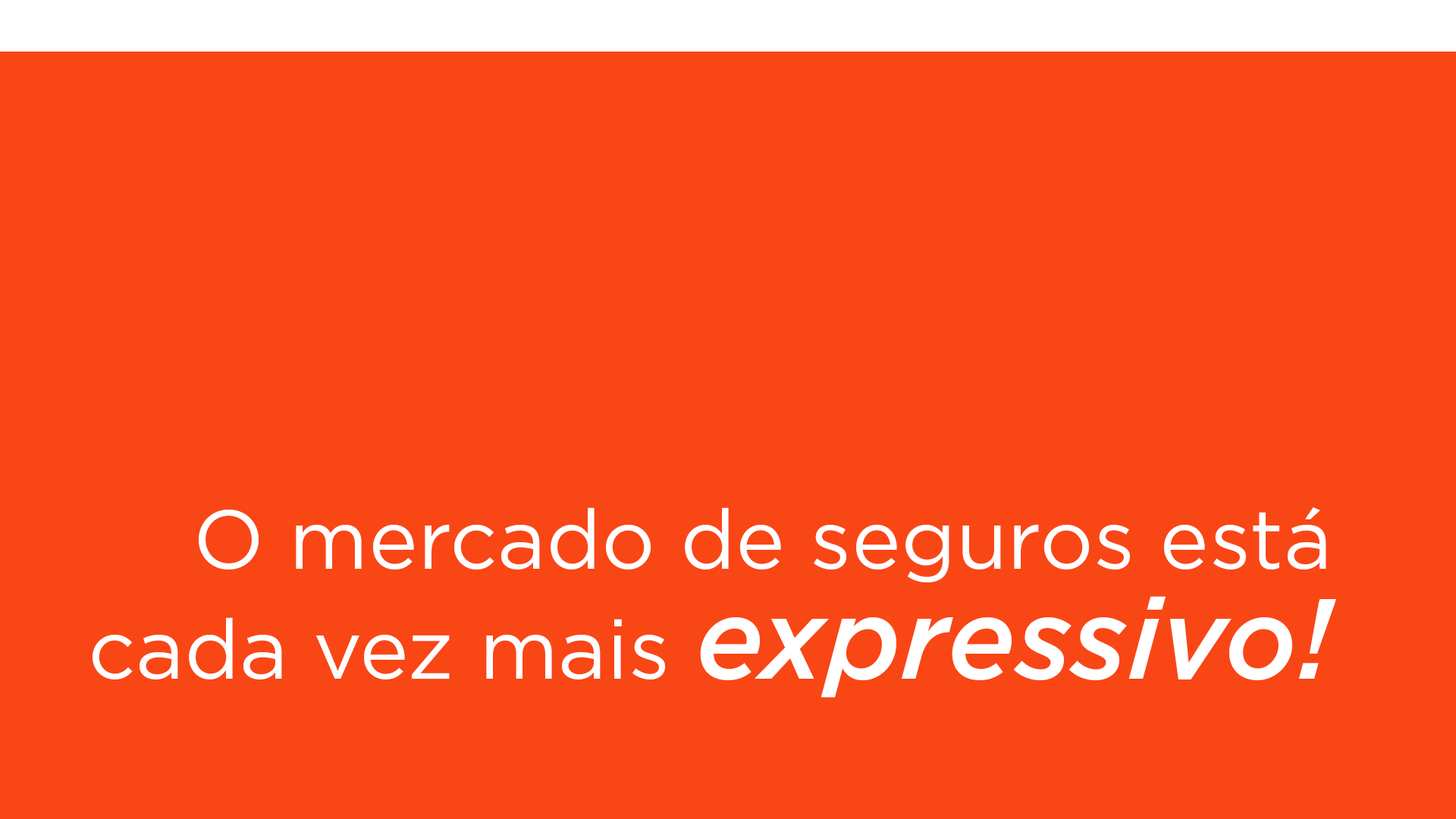
<style>
.page{position:relative;width:1456px;height:819px;background:#f94615}
.page>*{position:absolute;margin:0}
.t1{font:83.4px "Gotham-Book";color:#ffffff}
.t2{font:113.7px "Gotham-MediumItalic";color:#ffffff}
</style>
<div class="page">
<p class="t1" style="left:93px;top:507px;width:1243px;height:191px">O mercado de seguros está cada vez mais <span class="t2">expressivo!</span></p>
</div>
